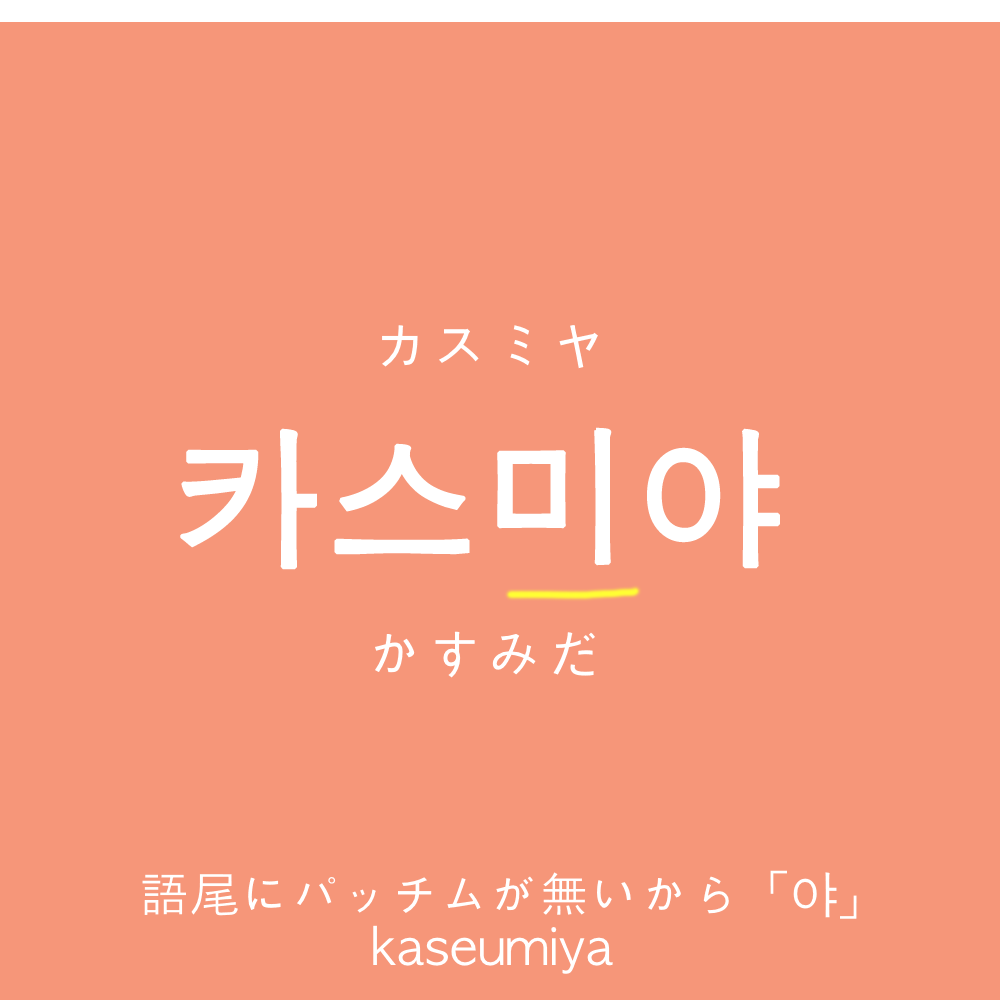
<style>
.page{position:relative;width:1000px;height:1000px;background:#f69679}
.page>*{position:absolute;margin:0}
.t1{font:60px "AppleGothic";color:#ffffff}
.t2{font:50px "AppleGothic";color:#ffffff}
</style>
<div class="page">
<p class="t1" style="left:382px;top:325px;width:216px;height:44px">カスミヤ</p>
<p class="t1" style="left:375px;top:631px;width:220px;height:47px">かすみだ</p>
<p class="t2" style="left:142px;top:870px;width:715px;height:49px">語尾にパッチムが無いから「야」</p>
<p class="t2" style="left:373px;top:925px;width:240px;height:49px">kaseumiya</p>
</div>
